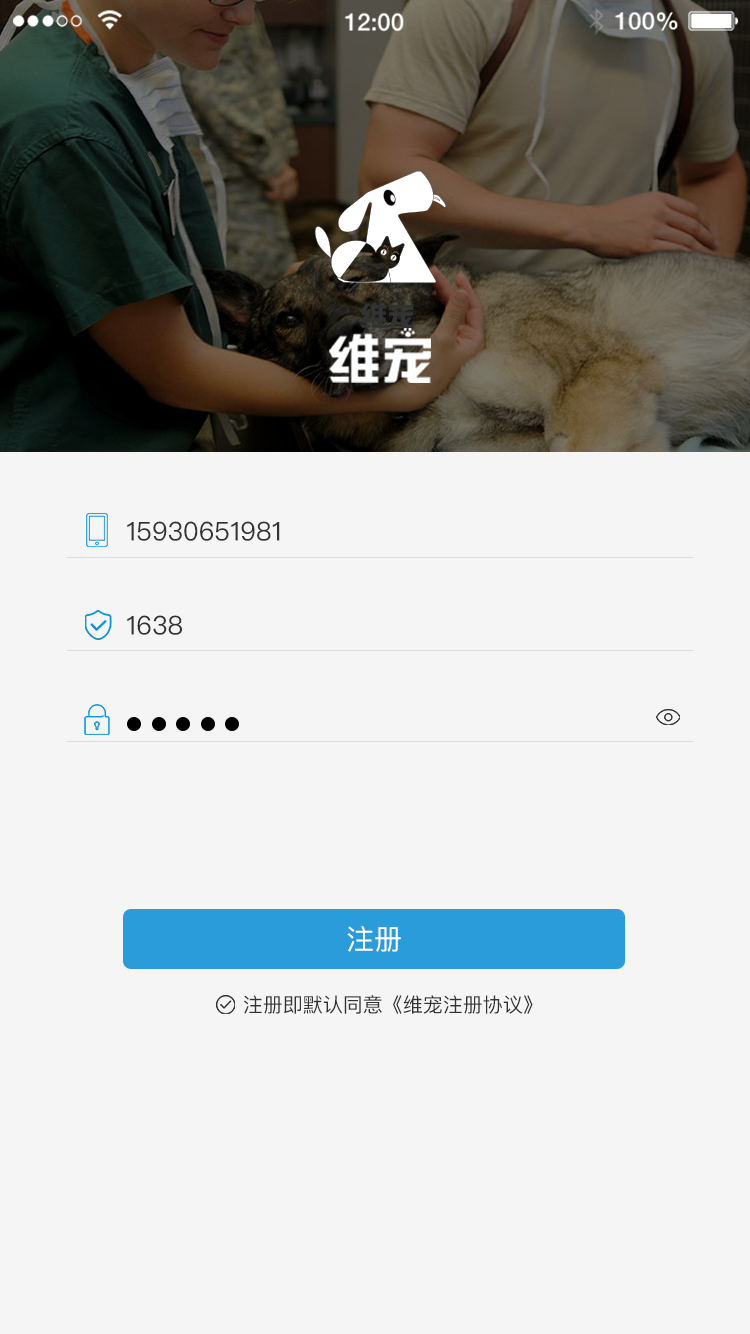
<style>
.page{position:relative;width:750px;height:1334px;background:#f5f5f5}
.page>*{position:absolute;margin:0}
.t1{font:26px "PingFangSC-Regular";color:#333333}
.t2{font:28px "PingFangSC-Regular";color:#ffffff}
.t3{font:20px "PingFangSC-Regular";color:#333333}
</style>
<div class="page">
<p class="t1" style="left:127px;top:521px;width:153px;height:20px">15930651981</p>
<p class="t1" style="left:127px;top:615px;width:55px;height:20px">1638</p>
<p class="t2" style="left:347px;top:926px;width:54px;height:26px">注册</p>
<p class="t3" style="left:243px;top:995px;width:290px;height:19px">注册即默认同意《维宠注册协议》</p>
</div>
